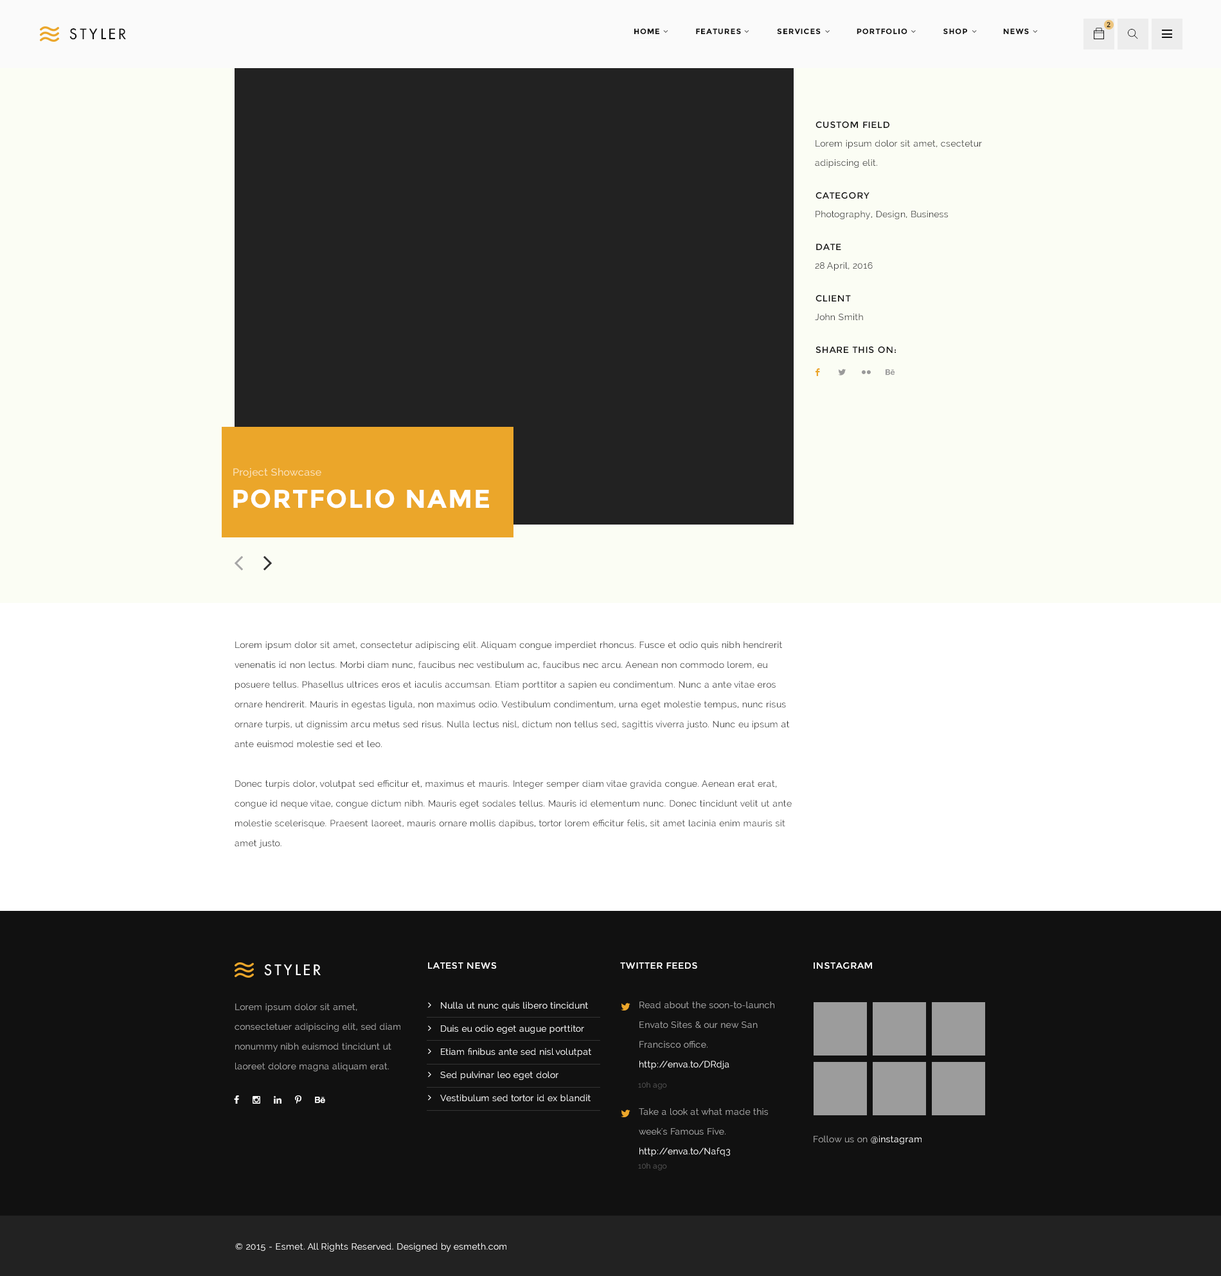
<style>
.page{position:relative;width:1221px;height:1276px;background:#fbfdf4}
.page>*{position:absolute;margin:0}
.t1{font:14.1px "FuturaLT";letter-spacing:0.2em;color:#111111;text-transform:uppercase}
.t2{font:7.7px "Montserrat-Bold";letter-spacing:0.075em;color:#111111;text-transform:uppercase}
.t3{font:7.1px "Montserrat-Regular";letter-spacing:0.075em;color:#111111;text-transform:uppercase}
.t4{font:9px "Montserrat-Regular";letter-spacing:0.05em;color:#111111;text-transform:uppercase}
.t5{font:9px/19.3px "Raleway";letter-spacing:0.02em;color:#333333}
.t6{font:9px "Raleway";letter-spacing:0.02em;color:#333333}
.t7{font:12.9px "Socialico";letter-spacing:0.02em;color:#eba62a}
.t8{font:12.9px "Socialico";letter-spacing:0.02em;color:#9a9a9a}
.t9{font:10.3px "Raleway-Medium";letter-spacing:0.02em;color:#fadfaf}
.t10{font:25.7px "Montserrat-Bold";letter-spacing:0.05em;color:#ffffff;text-transform:uppercase}
.t11{font:9px/19.8px "Raleway";letter-spacing:0.02em;color:#333333}
.t12{font:14.1px "FuturaLT";letter-spacing:0.2em;color:#ffffff;text-transform:uppercase}
.t13{font:9px "Montserrat-Regular";letter-spacing:0.05em;color:#ffffff;text-transform:uppercase}
.t14{font:9px/23.1px "Raleway";letter-spacing:0.02em;color:#ffffff}
.t15{font:9px/19.8px "Raleway";letter-spacing:0.02em;color:#a9a9a9}
.t16{font:9px/19.8px "Raleway";letter-spacing:0.02em;color:#ffffff}
.t17{font:7.7px "Raleway";letter-spacing:0.02em;color:#545454}
.t18{font:9px "Raleway";letter-spacing:0.02em;color:#a9a9a9}
.t19{font:9px "Raleway";letter-spacing:0.02em;color:#ffffff}
</style>
<div class="page">
<p class="t1" style="left:69px;top:28px;width:57px;height:12px">styler</p>
<p class="t2" style="left:634px;top:28px;width:395px;height:6px">HOME              FEATURES              SERVICES              portfolio              SHOP              NEWS</p>
<p class="t3" style="left:1107px;top:22px;width:4px;height:6px">2</p>
<p class="t4" style="left:816px;top:122px;width:74px;height:6px">custom field</p>
<p class="t5" style="left:815px;top:140px;width:167px;height:28px">Lorem ipsum dolor sit amet, csectetur <br>adipiscing elit.</p>
<p class="t4" style="left:816px;top:192px;width:54px;height:7px">category</p>
<p class="t6" style="left:816px;top:210px;width:132px;height:10px">Photography, Design, Business</p>
<p class="t4" style="left:816px;top:244px;width:26px;height:6px">date</p>
<p class="t6" style="left:815px;top:262px;width:58px;height:9px">28 April, 2016</p>
<p class="t4" style="left:816px;top:295px;width:35px;height:7px">client</p>
<p class="t6" style="left:815px;top:313px;width:48px;height:8px">John Smith</p>
<p class="t4" style="left:816px;top:346px;width:80px;height:7px">Share this on:</p>
<p class="t7" style="left:816px;top:368px;width:4px;height:8px">F</p>
<p class="t8" style="left:838px;top:369px;width:9px;height:6px">L</p>
<p class="t8" style="left:862px;top:370px;width:9px;height:4px">N</p>
<p class="t8" style="left:886px;top:369px;width:10px;height:6px">E</p>
<p class="t9" style="left:233px;top:468px;width:88px;height:10px">Project Showcase</p>
<p class="t10" style="left:233px;top:489px;width:256px;height:20px">portfolio name</p>
<p class="t11" style="left:235px;top:641px;width:557px;height:207px">Lorem ipsum dolor sit amet, consectetur adipiscing elit. Aliquam congue imperdiet rhoncus. Fusce et odio quis nibh hendrerit venenatis id non lectus. Morbi diam nunc, faucibus nec vestibulum ac, faucibus nec arcu. Aenean non commodo lorem, eu posuere tellus. Phasellus ultrices eros et iaculis accumsan. Etiam porttitor a sapien eu condimentum. Nunc a ante vitae eros ornare hendrerit. Mauris in egestas ligula, non maximus odio. Vestibulum condimentum, urna eget molestie tempus, nunc risus ornare turpis, ut dignissim arcu metus sed risus. Nulla lectus nisl, dictum non tellus sed, sagittis viverra justo. Nunc eu ipsum at ante euismod molestie sed et leo.<br><br>Donec turpis dolor, volutpat sed efficitur et, maximus et mauris. Integer semper diam vitae gravida congue. Aenean erat erat, congue id neque vitae, congue dictum nibh. Mauris eget sodales tellus. Mauris id elementum nunc. Donec tincidunt velit ut ante molestie scelerisque. Praesent laoreet, mauris ornare mollis dapibus, tortor lorem efficitur felis, sit amet lacinia enim mauris sit amet justo.</p>
<p class="t12" style="left:264px;top:964px;width:57px;height:12px">styler</p>
<p class="t13" style="left:428px;top:962px;width:69px;height:7px">latest news</p>
<p class="t13" style="left:620px;top:962px;width:78px;height:7px">twitter feeds</p>
<p class="t13" style="left:814px;top:962px;width:58px;height:7px">instagram</p>
<p class="t14" style="left:440px;top:1002px;width:151px;height:100px">Nulla ut nunc quis libero tincidunt<br>Duis eu odio eget augue porttitor<br>Etiam finibus ante sed nisl volutpat<br>Sed pulvinar leo eget dolor<br>Vestibulum sed tortor id ex blandit</p>
<p class="t15" style="left:640px;top:1002px;width:135px;height:68px">Read about the soon-to-launch Envato Sites &amp; our new San Francisco office. <span class="t16">http://enva.to/DRdja</span></p>
<p class="t15" style="left:235px;top:1004px;width:166px;height:68px">Lorem ipsum dolor sit amet, consectetuer adipiscing elit, sed diam nonummy nibh euismod tincidunt ut laoreet dolore magna aliquam erat.</p>
<p class="t17" style="left:638px;top:1082px;width:29px;height:8px">10h ago</p>
<p class="t15" style="left:639px;top:1108px;width:129px;height:48px">Take a look at what made this week's Famous Five. <span class="t16">http://enva.to/Nafq3</span></p>
<p class="t18" style="left:814px;top:1135px;width:108px;height:9px">Follow us on <span class="t19">@instagram</span></p>
<p class="t17" style="left:638px;top:1163px;width:29px;height:8px">10h ago</p>
<p class="t19" style="left:235px;top:1243px;width:272px;height:9px">© 2015 - Esmet. All Rights Reserved. Designed by esmeth.com</p>
</div>
